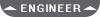
<style>
.page{position:relative;width:100px;height:17px;background:#606268}
.page>*{position:absolute;margin:0}
.t1{font:11px "System";color:#ffffff}
</style>
<div class="page">
<p class="t1" style="left:21px;top:4px;width:60px;height:8px">ENGINEER</p>
</div>
